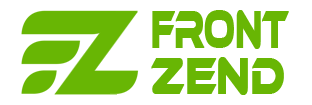
<style>
.page{position:relative;width:312px;height:105px;background:#ffffff}
.page>*{position:absolute;margin:0}
.t1{font:54.1px "EthnocentricRg-Regular";color:#68b604;font-weight:bold;scale:0.53 1}
.t2{font:52.9px "EthnocentricRg-Regular";color:#68b604;font-weight:bold;scale:0.68 1}
</style>
<div class="page">
<p class="t1" style="left:152px;top:10px;width:137px;height:39px">Front</p>
<p class="t2" style="left:151px;top:57px;width:133px;height:38px">Zend</p>
</div>
